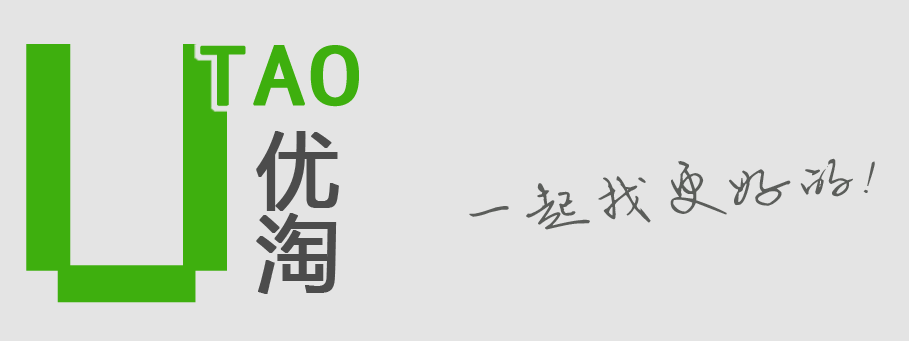
<style>
.page{position:relative;width:909px;height:341px;background:#e4e4e4}
.page>*{position:absolute;margin:0}
.t1{font:337.5px "Small Fonts";color:#3eaf0e;text-transform:uppercase;font-weight:bold;scale:1.19 1}
.t2{font:86px "SimHei";color:#3eaf0e;text-transform:uppercase;font-weight:bold;scale:1.23 1}
.t3{font:83.3px/102.7px "MicrosoftYaHei";letter-spacing:0.01em;color:#4c4c4c;text-transform:uppercase;font-weight:bold}
.t4{font:67.5px "--";color:#5b5d5a;text-transform:uppercase}
</style>
<div class="page">
<p class="t1" style="left:26px;top:44px;width:201px;height:259px">u</p>
<p class="t2" style="left:200px;top:45px;width:159px;height:62px">tao</p>
<p class="t3" style="left:256px;top:131px;width:83px;height:163px">优淘</p>
<p class="t4" style="left:469px;top:158px;width:406px;height:72px;rotate:-6deg">一起找更好的!</p>
</div>
